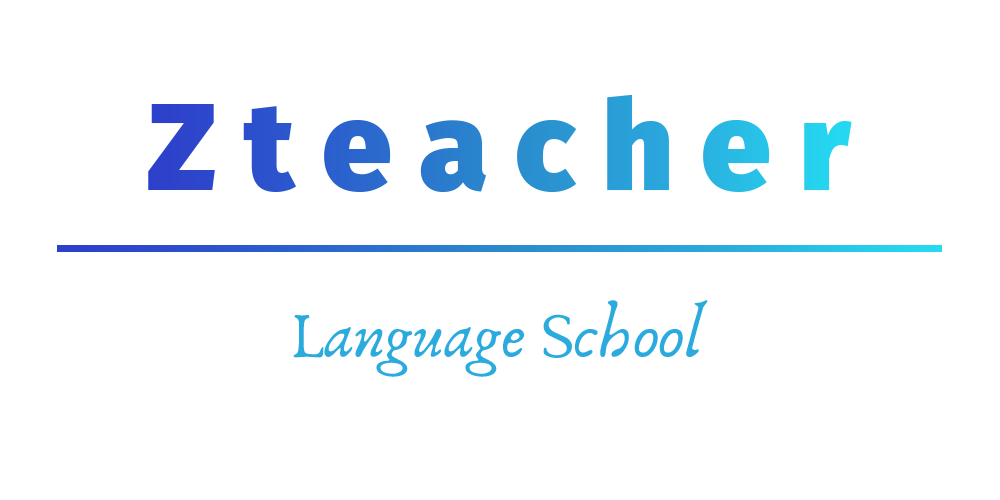
<style>
.page{position:relative;width:1000px;height:500px;background:#ffffff}
.page>*{position:absolute;margin:0}
.t1{font:125px "FiraSans-Black"}
.t2{font:66.7px "Anaktoria";color:#2aaadd}
</style>
<div class="page">
<p class="t1" style="left:148px;top:94px;width:704px;height:98px">Z t e a c h e r</p>
<p class="t2" style="left:293px;top:300px;width:415px;height:77px">Language School</p>
</div>
